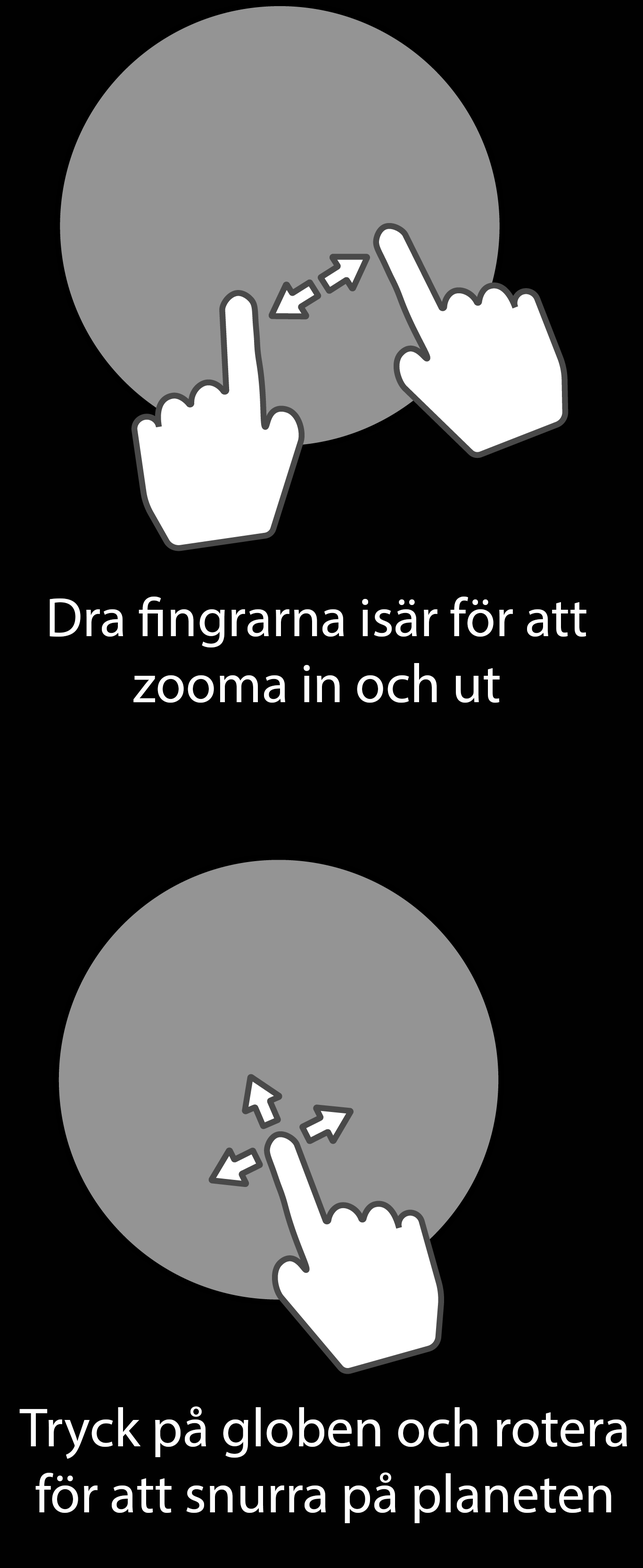
<style>
.page{position:relative;width:643px;height:1568px;background:#010101}
.page>*{position:absolute;margin:0}
.t1{font:55px "MyriadPro-Regular";color:#ffffff}
</style>
<div class="page">
<p class="t1" style="left:50px;top:597px;width:537px;height:106px;text-align:center">Dra fingrarna isär för att<br>zooma in och ut</p>
<p class="t1" style="left:19px;top:1406px;width:608px;height:117px;text-align:center">Tryck på globen och rotera<br>för att snurra på planeten</p>
</div>
